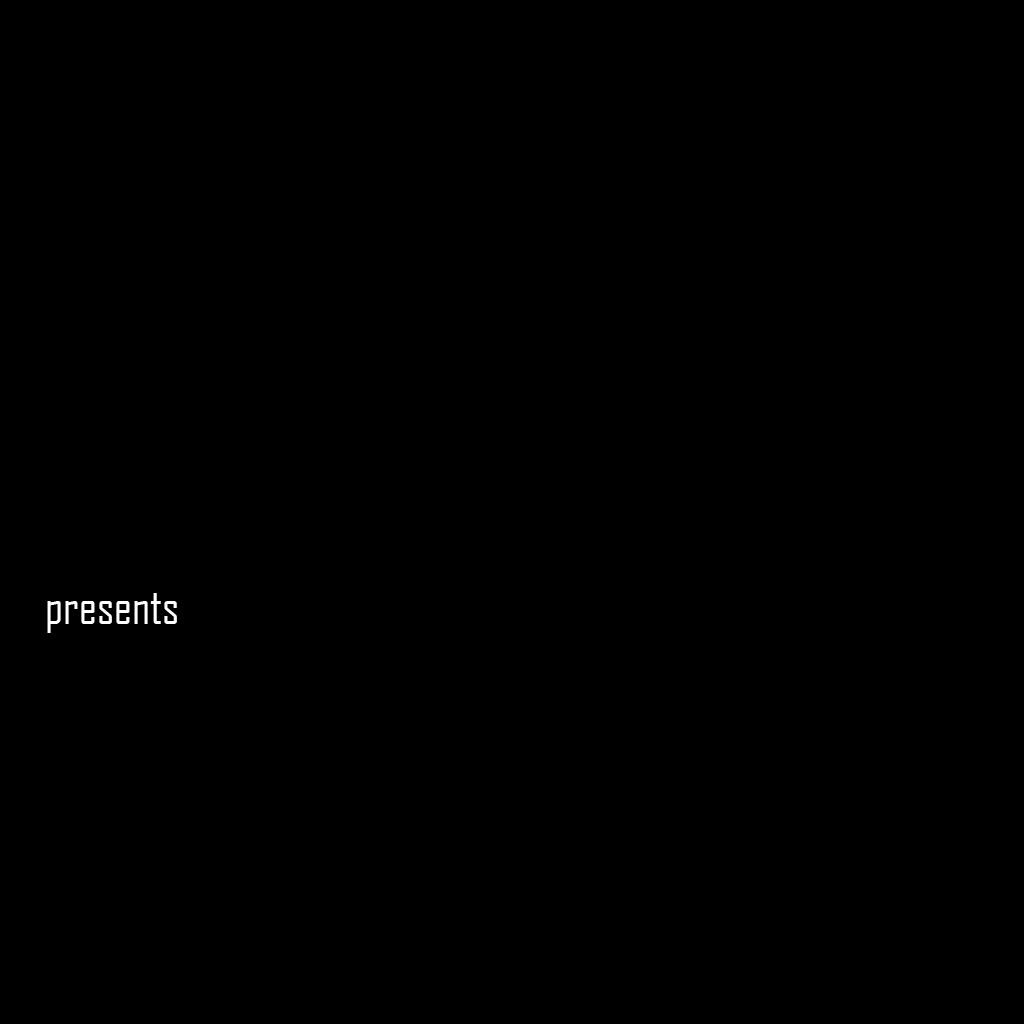
<style>
.page{position:relative;width:1024px;height:1024px;background:#000000}
.page>*{position:absolute;margin:0}
.t1{font:48px "AgencyFBCyrillic";color:#ffffff}
</style>
<div class="page">
<p class="t1" style="left:47px;top:593px;width:130px;height:40px">presents</p>
</div>
